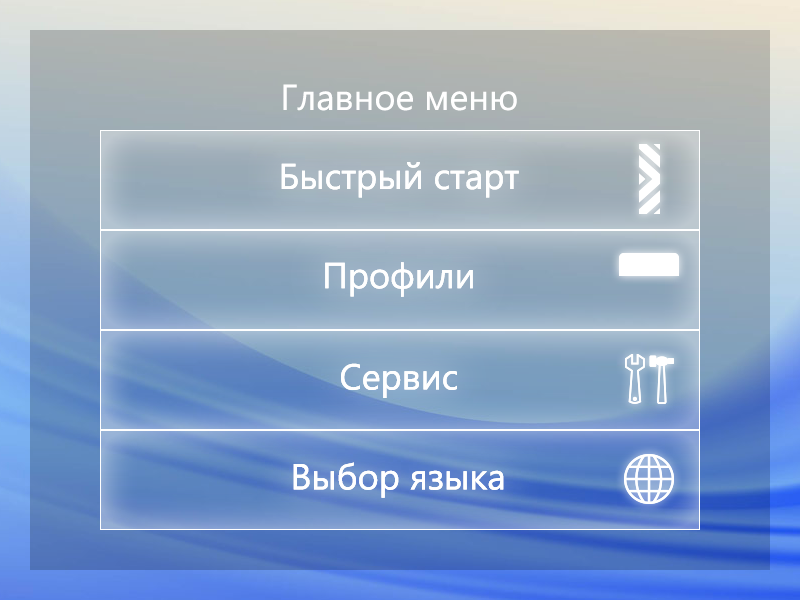
<style>
.page{position:relative;width:800px;height:600px}
.page>*{position:absolute;margin:0}
.t1{font:36px "SegoeUI";color:#ffffff}
</style>
<div class="page">
<p class="t1" style="left:283px;top:84px;width:234px;height:27px">Главное меню</p>
<p class="t1" style="left:281px;top:162px;width:238px;height:36px">Быстрый старт</p>
<p class="t1" style="left:281px;top:162px;width:238px;height:36px">Быстрый старт</p>
<p class="t1" style="left:325px;top:262px;width:148px;height:35px">Профили</p>
<p class="t1" style="left:325px;top:262px;width:148px;height:35px">Профили</p>
<p class="t1" style="left:341px;top:363px;width:116px;height:35px">Сервис</p>
<p class="t1" style="left:341px;top:363px;width:116px;height:35px">Сервис</p>
<p class="t1" style="left:293px;top:462px;width:211px;height:36px">Выбор языка</p>
<p class="t1" style="left:293px;top:462px;width:211px;height:36px">Выбор языка</p>
</div>
